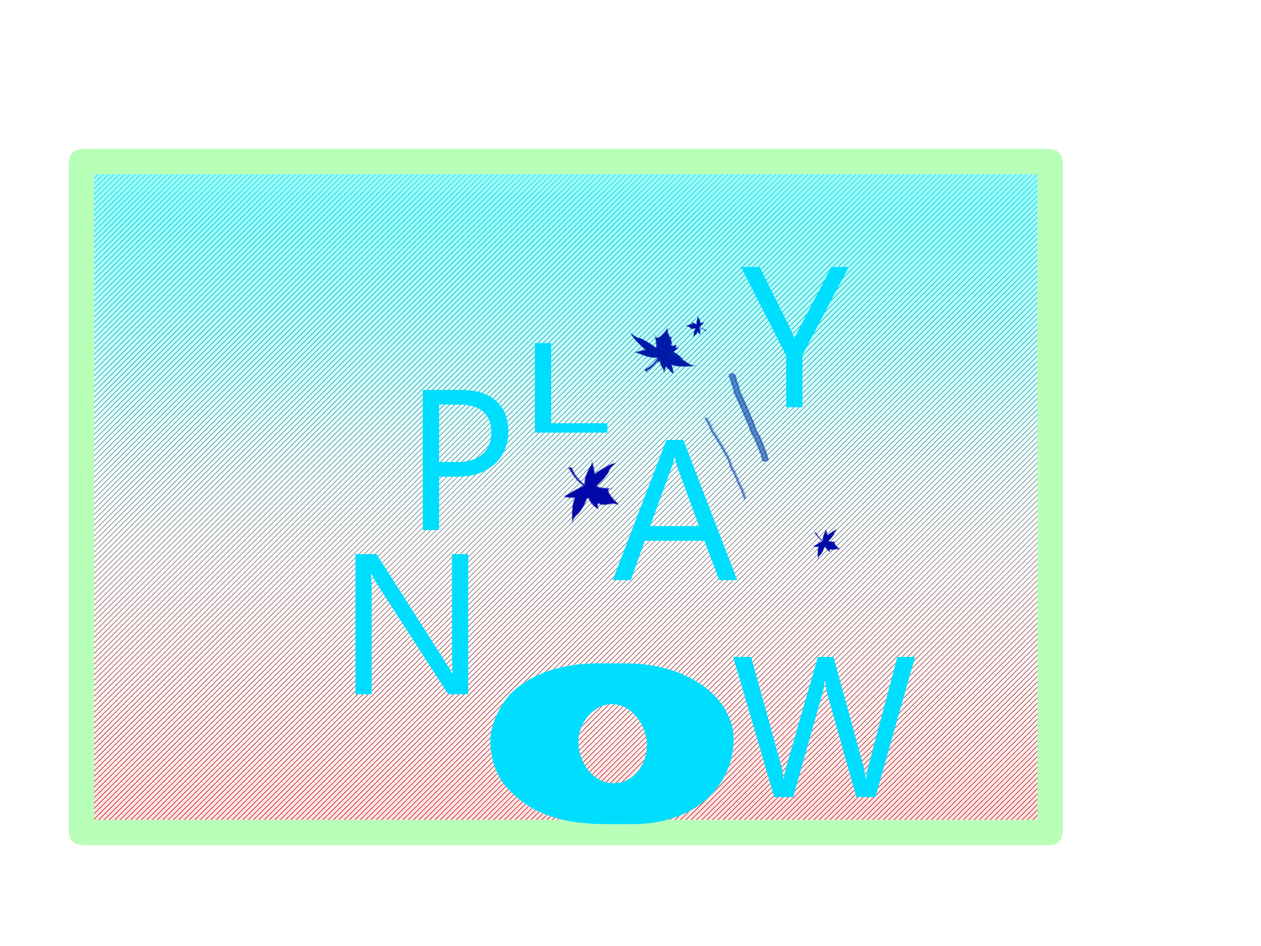
<style>
.page{position:relative;width:1261px;height:946px;background:#ffffff}
.page>*{position:absolute;margin:0}
.t1{font:200.2px/0px "SegoeUI";color:#00deff}
.t2{font:128.1px/0px "SegoeUI";color:#00deff;scale:1.56 1}
.t3{font:200.2px/164.1px "SegoeUI";color:#00deff}
.t4{font:208.6px/150.2px "BlackoakStd";letter-spacing:-0.08em;color:#00deff;font-weight:bold;scale:0.67 1}
</style>
<div class="page">
<p class="t1" style="left:355px;top:267px;width:560px;height:557px;text-align:center">P<span class="t2">L</span>AY<br><span class="t3">N</span><span class="t4">O</span><span class="t3">W</span></p>
</div>
